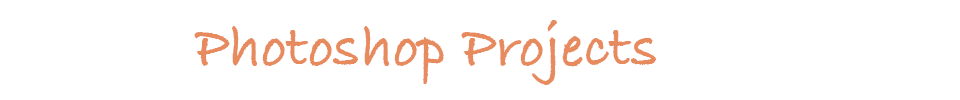
<style>
.page{position:relative;width:960px;height:100px;background:#ffffff}
.page>*{position:absolute;margin:0}
.t1{font:60px "BradleyHandITCTT-Bold";color:#e88b5f}
</style>
<div class="page">
<p class="t1" style="left:194px;top:20px;width:462px;height:65px">Photoshop Projects</p>
</div>
